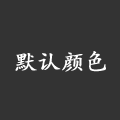
<style>
.page{position:relative;width:120px;height:120px;background:#333333}
.page>*{position:absolute;margin:0}
.t1{font:23px "KaiTi";color:#ffffff;font-weight:bold}
</style>
<div class="page">
<p class="t1" style="left:15px;top:51px;width:91px;height:21px">默认颜色</p>
</div>
